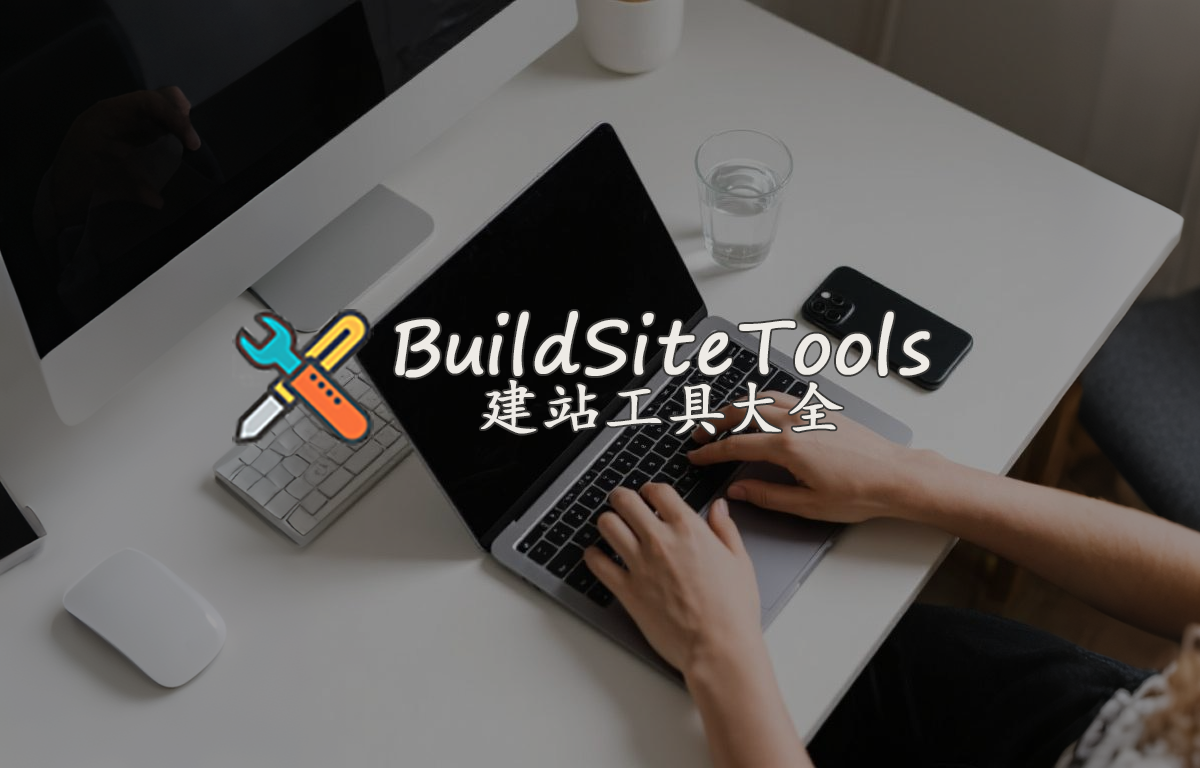
<style>
.page{position:relative;width:1200px;height:768px}
.page>*{position:absolute;margin:0}
.t1{font:72.9px "SegoePrint";letter-spacing:0.075em;color:#eeebe6;font-weight:bold}
.t2{font:60.6px "KaiTi";letter-spacing:0.135em;color:#eeebe6;font-weight:bold}
</style>
<div class="page">
<p class="t1" style="left:395px;top:311px;width:535px;height:67px">BuildSiteTools</p>
<p class="t2" style="left:481px;top:380px;width:362px;height:54px">建站工具大全</p>
</div>
